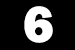
<style>
.page{position:relative;width:75px;height:50px;background:#000000}
.page>*{position:absolute;margin:0}
.t1{font:52.6px "FranklinGothic-Heavy";color:#ffffff}
</style>
<div class="page">
<p class="t1" style="left:24px;top:6px;width:29px;height:37px">6</p>
</div>
